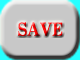
<style>
.page{position:relative;width:80px;height:60px;background:#c8c8c8}
.page>*{position:absolute;margin:0}
.t1{font:18px "MyungjoXB-HM"}
</style>
<div class="page">
<p class="t1" style="left:18px;top:22px;width:45px;height:14px">SAVE</p>
</div>
